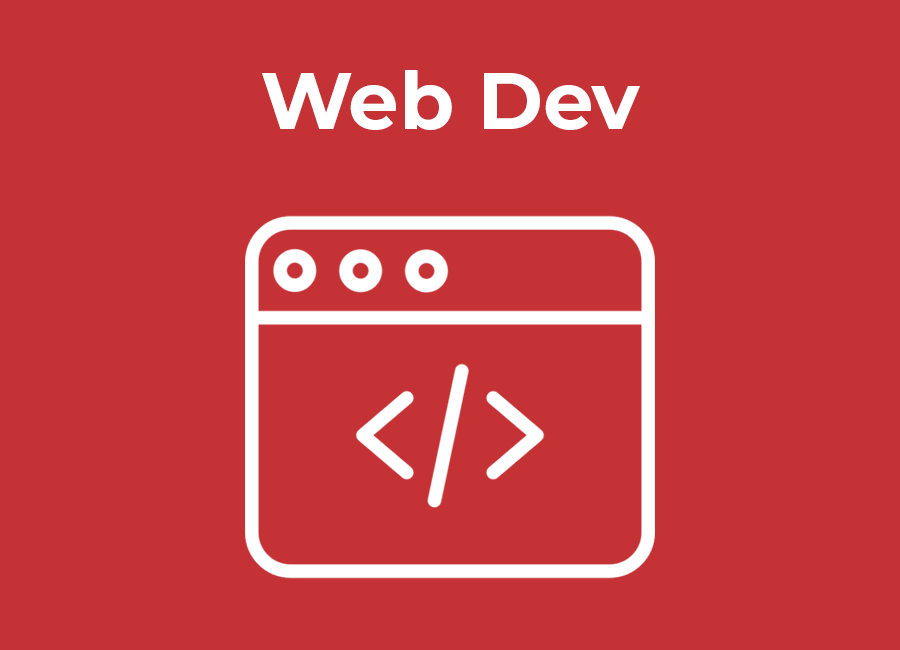
<style>
.page{position:relative;width:900px;height:650px;background:#c43235}
.page>*{position:absolute;margin:0}
.t1{font:80px "Montserrat-Bold";color:#ffffff}
</style>
<div class="page">
<p class="t1" style="left:262px;top:70px;width:378px;height:60px">Web Dev</p>
</div>
